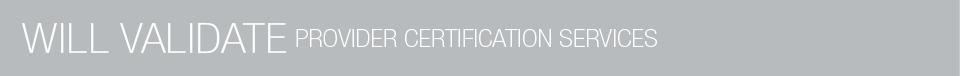
<style>
.page{position:relative;width:960px;height:76px;background:#b7bbbd}
.page>*{position:absolute;margin:0}
.t1{font:42.4px "HelveticaNeueLTStd-ThCn";color:#ffffff;scale:1.2 1}
.t2{font:24px "HelveticaNeueLTStd-ThCn";color:#ffffff;scale:1.2 1}
</style>
<div class="page">
<p class="t1" style="left:22px;top:22px;width:265px;height:32px">WILL VALIDATE</p>
<p class="t2" style="left:296px;top:29px;width:361px;height:18px">PROVIDER CERTIFICATION SERVICES</p>
</div>
